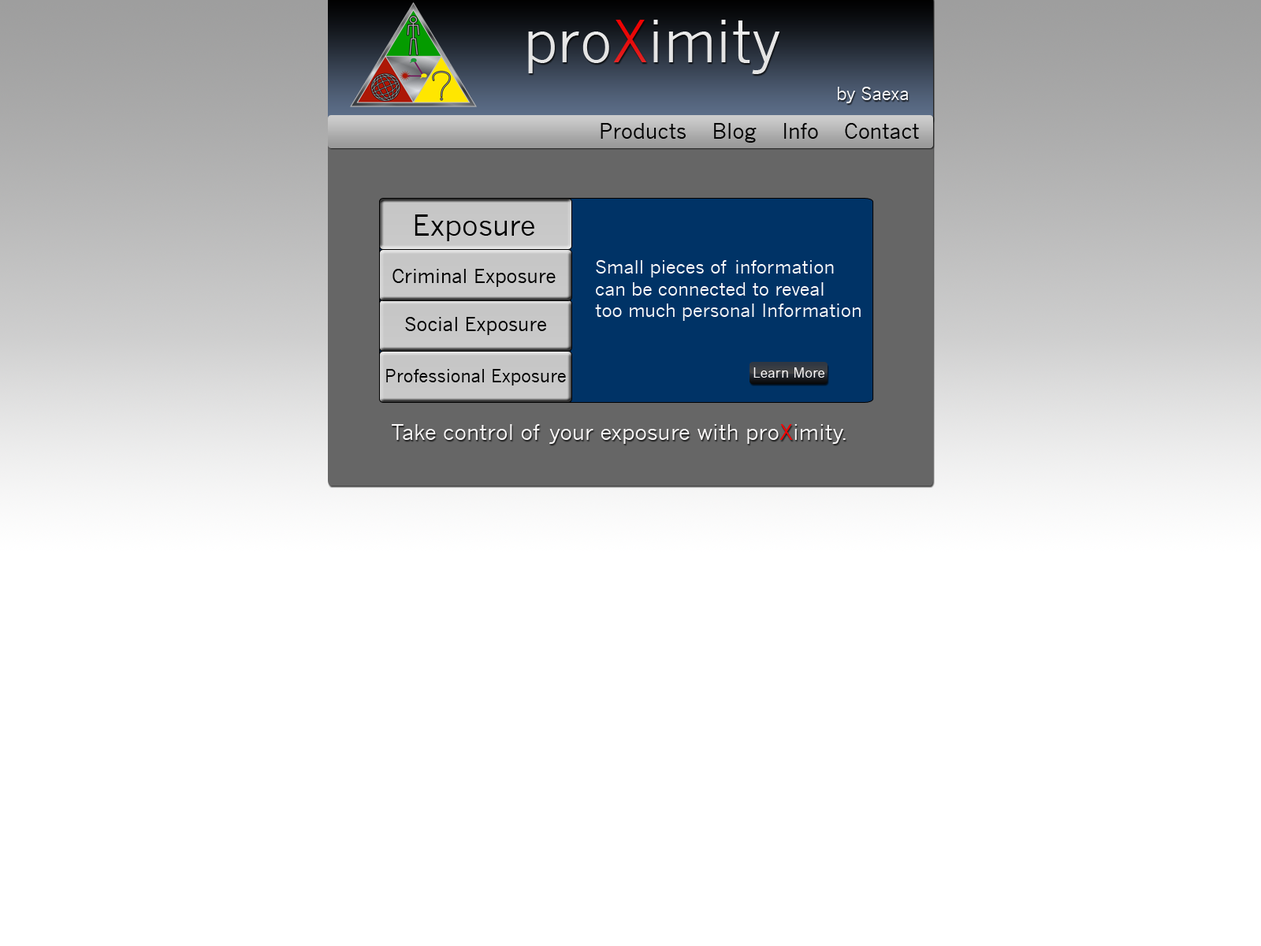
<style>
.page{position:relative;width:1261px;height:946px;background:#ffffff}
.page>*{position:absolute;margin:0}
.t1{font:56.5px "NewsGothicMT";color:#e5e4e4}
.t2{font:17.3px "NewsGothicMT";color:#ffffff}
.t3{font:20.5px "NewsGothicMT";color:#000000}
.t4{font:28.4px "NewsGothicMT";color:#000000}
.t5{font:18.9px "NewsGothicMT";color:#000000}
.t6{font:18.1px "NewsGothicMT";color:#fdfbfb}
.t7{font:17.3px "NewsGothicMT";color:#000000}
.t8{font:13.4px "NewsGothicMT";color:#fbf9f9}
.t9{font:21.3px "NewsGothicMT";color:#fbf9f9}
.t10{font:21.3px "NewsGothicMT";color:#fe0000}
</style>
<div class="page">
<p class="t1" style="left:528px;top:20px;width:252px;height:54px">proXimity</p>
<p class="t2" style="left:838px;top:87px;width:70px;height:16px">by Saexa</p>
<p class="t3" style="left:601px;top:123px;width:318px;height:20px">Products    Blog    Info    Contact</p>
<p class="t4" style="left:415px;top:214px;width:119px;height:27px">Exposure</p>
<p class="t5" style="left:392px;top:269px;width:164px;height:18px">Criminal Exposure</p>
<p class="t6" style="left:595px;top:260px;width:266px;height:61px">Small pieces of information <br>can be connected to reveal <br>too much personal Information</p>
<p class="t5" style="left:405px;top:317px;width:141px;height:18px">Social Exposure</p>
<p class="t7" style="left:386px;top:369px;width:180px;height:16px">Professional Exposure</p>
<p class="t8" style="left:753px;top:367px;width:71px;height:10px">Learn More</p>
<p class="t9" style="left:392px;top:424px;width:454px;height:20px">Take control of your exposure with pro<span class="t10">X</span>imity.</p>
</div>
